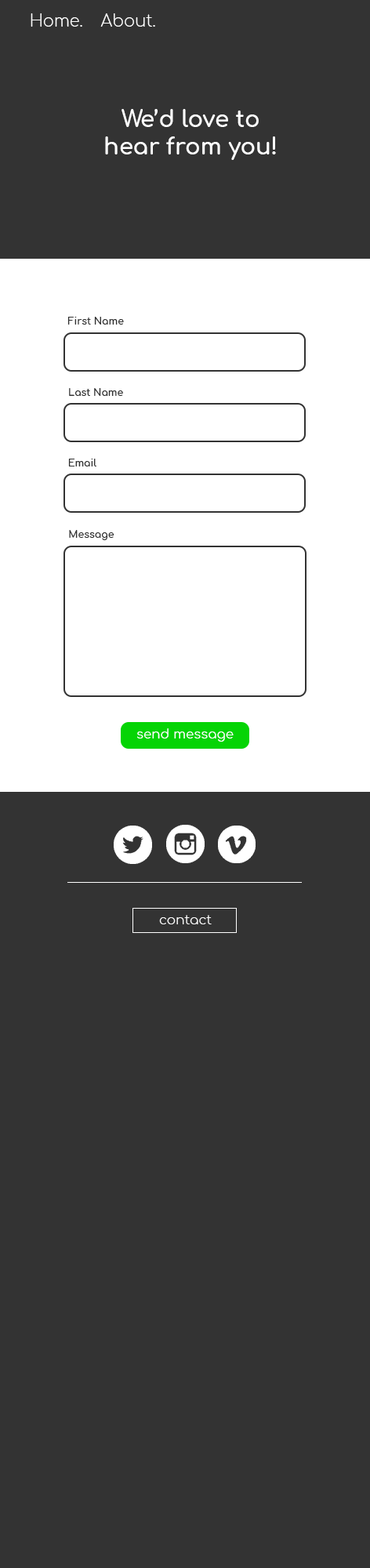
<style>
.page{position:relative;width:370px;height:1568px;background:#333333}
.page>*{position:absolute;margin:0}
.t1{font:16.3px "Comfortaa-Light";color:#ffffff}
.t2{font:22.9px "Comfortaa-Bold";color:#ffffff}
.t3{font:9.8px "Comfortaa-Bold";color:#333333}
.t4{font:13.1px "Comfortaa-Regular";color:#ffffff}
.t5{font:13.1px "Comfortaa-Light";color:#ffffff}
</style>
<div class="page">
<p class="t1" style="left:31px;top:13px;width:51px;height:14px">Home.</p>
<p class="t1" style="left:100px;top:13px;width:55px;height:14px">About.</p>
<p class="t2" style="left:105px;top:109px;width:171px;height:51px;text-align:center">We’d love to<br>hear from you!</p>
<p class="t3" style="left:67px;top:317px;width:57px;height:8px">First Name</p>
<p class="t3" style="left:69px;top:388px;width:54px;height:8px">Last Name</p>
<p class="t3" style="left:68px;top:459px;width:28px;height:7px">Email</p>
<p class="t3" style="left:69px;top:530px;width:45px;height:10px">Message</p>
<p class="t4" style="left:137px;top:728px;width:97px;height:14px">send message</p>
<p class="t5" style="left:159px;top:915px;width:53px;height:9px">contact</p>
</div>
